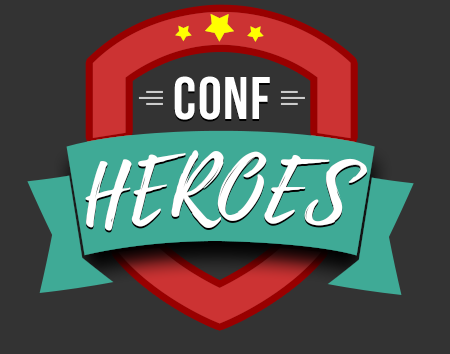
<style>
.page{position:relative;width:450px;height:354px;background:#333333}
.page>*{position:absolute;margin:0}
.t1{font:60px "BebasNeue";letter-spacing:0.025em;color:#ffffff}
.t2{font:78px "Playlist-Script";letter-spacing:0.025em;color:#ffffff}
</style>
<div class="page">
<p class="t1" style="left:174px;top:76px;width:96px;height:44px">CONF</p>
<p class="t2" style="left:85px;top:150px;width:283px;height:81px">HEROES</p>
</div>
